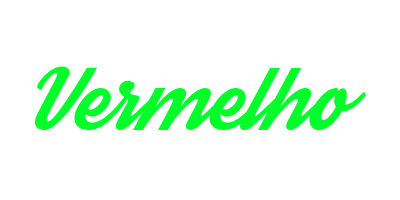
<style>
.page{position:relative;width:400px;height:200px;background:#ffffff}
.page>*{position:absolute;margin:0}
.t1{font:63px "Streetwear";color:#00fe2a}
</style>
<div class="page">
<p class="t1" style="left:35px;top:66px;width:331px;height:64px">Vermelho</p>
</div>
